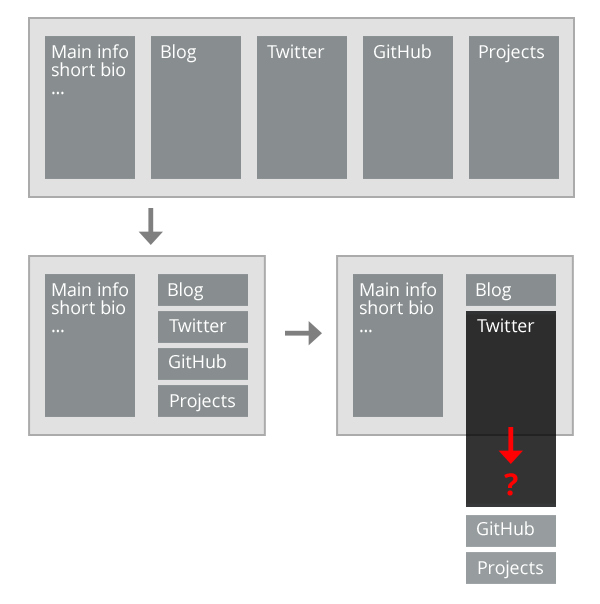
<style>
.page{position:relative;width:600px;height:604px;background:#ffffff}
.page>*{position:absolute;margin:0}
.t1{font:18px/18px "OpenSans";letter-spacing:0.005em;color:#ffffff}
.t2{font:18px "OpenSans";letter-spacing:0.005em;color:#ffffff}
.t3{font:30px "OpenSans-Bold";letter-spacing:0.005em;color:#ff0000}
</style>
<div class="page">
<p class="t1" style="left:52px;top:44px;width:76px;height:51px">Main info<br>short bio<br>...</p>
<p class="t2" style="left:161px;top:44px;width:35px;height:19px">Blog</p>
<p class="t2" style="left:267px;top:44px;width:58px;height:15px">Twitter</p>
<p class="t2" style="left:374px;top:44px;width:57px;height:15px">GitHub</p>
<p class="t2" style="left:479px;top:44px;width:65px;height:19px">Projects</p>
<p class="t1" style="left:52px;top:282px;width:76px;height:51px">Main info<br>short bio<br>...</p>
<p class="t2" style="left:168px;top:282px;width:35px;height:19px">Blog</p>
<p class="t1" style="left:360px;top:282px;width:76px;height:51px">Main info<br>short bio<br>...</p>
<p class="t2" style="left:476px;top:282px;width:35px;height:19px">Blog</p>
<p class="t2" style="left:169px;top:318px;width:58px;height:15px">Twitter</p>
<p class="t2" style="left:477px;top:318px;width:58px;height:15px">Twitter</p>
<p class="t2" style="left:169px;top:354px;width:57px;height:15px">GitHub</p>
<p class="t2" style="left:170px;top:393px;width:65px;height:19px">Projects</p>
<p class="t3" style="left:504px;top:473px;width:14px;height:23px">?</p>
<p class="t2" style="left:477px;top:521px;width:57px;height:15px">GitHub</p>
<p class="t2" style="left:478px;top:560px;width:65px;height:19px">Projects</p>
</div>
